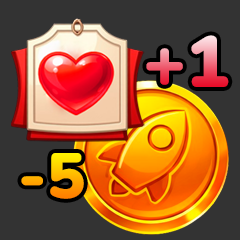
<style>
.page{position:relative;width:240px;height:240px;background:#333333}
.page>*{position:absolute;margin:0}
.t1{font:72px "Nunito-Black"}
.t2{font:64px "Nunito-Black"}
</style>
<div class="page">
<p class="t1" style="left:146px;top:35px;width:83px;height:52px">+1</p>
<p class="t2" style="left:21px;top:153px;width:63px;height:46px">-5</p>
</div>
